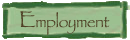
<style>
.page{position:relative;width:130px;height:40px}
.page>*{position:absolute;margin:0}
.t1{font:16px "Papyrus";letter-spacing:-0.025em;color:#4f4126}
.t2{font:24px "Papyrus";letter-spacing:-0.025em;color:#4f4126}
</style>
<div class="page">
<p class="t1" style="left:20px;top:11px;width:90px;height:24px"><span class="t2">E</span>mployment</p>
</div>
